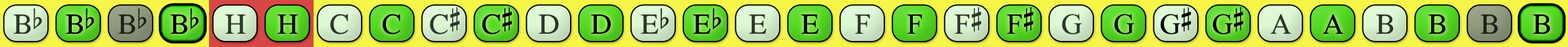
<style>
.page{position:relative;width:1568px;height:47px}
.page>*{position:absolute;margin:0}
.t1{font:29.2px "OpusChords";color:#30352d}
.t2{font:29.2px "OpusChords";color:#000000}
.t3{font:29.2px "OpusChords";color:#1f211b}
.t4{font:29.2px "OpusChords";color:#30362e}
.t5{font:29.2px "OpusChords";color:#2f352d}
.t6{font:29.2px "OpusChords";letter-spacing:-0.025em;color:#000000}
</style>
<div class="page">
<p class="t1" style="left:13px;top:9px;width:29px;height:25px">Bb</p>
<p class="t2" style="left:66px;top:9px;width:28px;height:25px">Bb</p>
<p class="t3" style="left:118px;top:9px;width:28px;height:25px">Bb</p>
<p class="t2" style="left:170px;top:9px;width:29px;height:25px">Bb</p>
<p class="t1" style="left:225px;top:15px;width:21px;height:19px">H</p>
<p class="t2" style="left:277px;top:15px;width:21px;height:19px">H</p>
<p class="t4" style="left:330px;top:14px;width:18px;height:21px">C</p>
<p class="t2" style="left:382px;top:14px;width:19px;height:21px">C</p>
<p class="t5" style="left:430px;top:7px;width:29px;height:28px">C#</p>
<p class="t2" style="left:482px;top:7px;width:30px;height:28px">C#</p>
<p class="t5" style="left:538px;top:15px;width:21px;height:19px">D</p>
<p class="t2" style="left:591px;top:15px;width:20px;height:19px">D</p>
<p class="t1" style="left:641px;top:9px;width:28px;height:25px">Eb</p>
<p class="t2" style="left:693px;top:9px;width:28px;height:25px">Eb</p>
<p class="t4" style="left:749px;top:15px;width:17px;height:19px">E</p>
<p class="t2" style="left:801px;top:15px;width:18px;height:19px">E</p>
<p class="t4" style="left:854px;top:15px;width:16px;height:19px">F</p>
<p class="t2" style="left:907px;top:15px;width:15px;height:19px">F</p>
<p class="t1" style="left:954px;top:7px;width:28px;height:27px">F#</p>
<p class="t2" style="left:1006px;top:7px;width:28px;height:27px">F#</p>
<p class="t5" style="left:1062px;top:14px;width:20px;height:21px">G</p>
<p class="t2" style="left:1114px;top:14px;width:20px;height:21px">G</p>
<p class="t6" style="left:1160px;top:7px;width:31px;height:28px">G#</p>
<p class="t6" style="left:1212px;top:7px;width:31px;height:28px">G#</p>
<p class="t5" style="left:1270px;top:14px;width:21px;height:20px">A</p>
<p class="t2" style="left:1322px;top:14px;width:21px;height:20px">A</p>
<p class="t1" style="left:1376px;top:15px;width:18px;height:19px">B</p>
<p class="t2" style="left:1428px;top:15px;width:18px;height:19px">B</p>
<p class="t3" style="left:1480px;top:15px;width:18px;height:19px">B</p>
<p class="t2" style="left:1533px;top:15px;width:17px;height:19px">B</p>
</div>
